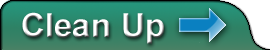
<style>
.page{position:relative;width:270px;height:50px}
.page>*{position:absolute;margin:0}
.t1{font:33.3px "Arial-BoldMT"}
</style>
<div class="page">
<p class="t1" style="left:22px;top:12px;width:142px;height:32px">Clean Up</p>
</div>
